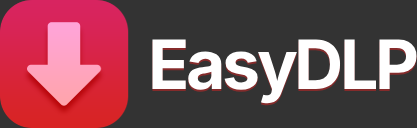
<style>
.page{position:relative;width:417px;height:128px;background:#333333}
.page>*{position:absolute;margin:0}
.t1{font:68px "Inter-Bold";letter-spacing:-0.05em;color:#ffffff}
</style>
<div class="page">
<p class="t1" style="left:152px;top:39px;width:265px;height:65px">EasyDLP</p>
</div>
